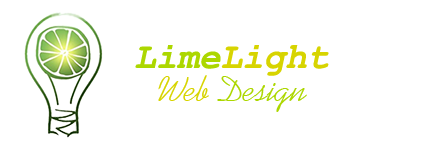
<style>
.page{position:relative;width:432px;height:144px;background:#ffffff}
.page>*{position:absolute;margin:0}
.t1{font:36px "CourierNewPS-BoldItalicMT";color:#d7d400}
.t2{font:36px "CourierNewPS-BoldItalicMT";color:#acd700}
.t3{font:36px "KaufmannBT-Regular";color:#acd700}
.t4{font:36px "KaufmannBT-Regular";color:#d7d400}
</style>
<div class="page">
<p class="t1" style="left:135px;top:45px;width:194px;height:31px"><span class="t2">Lime</span>Light</p>
<p class="t3" style="left:158px;top:75px;width:149px;height:37px"><span class="t4">Web </span>Design</p>
</div>
